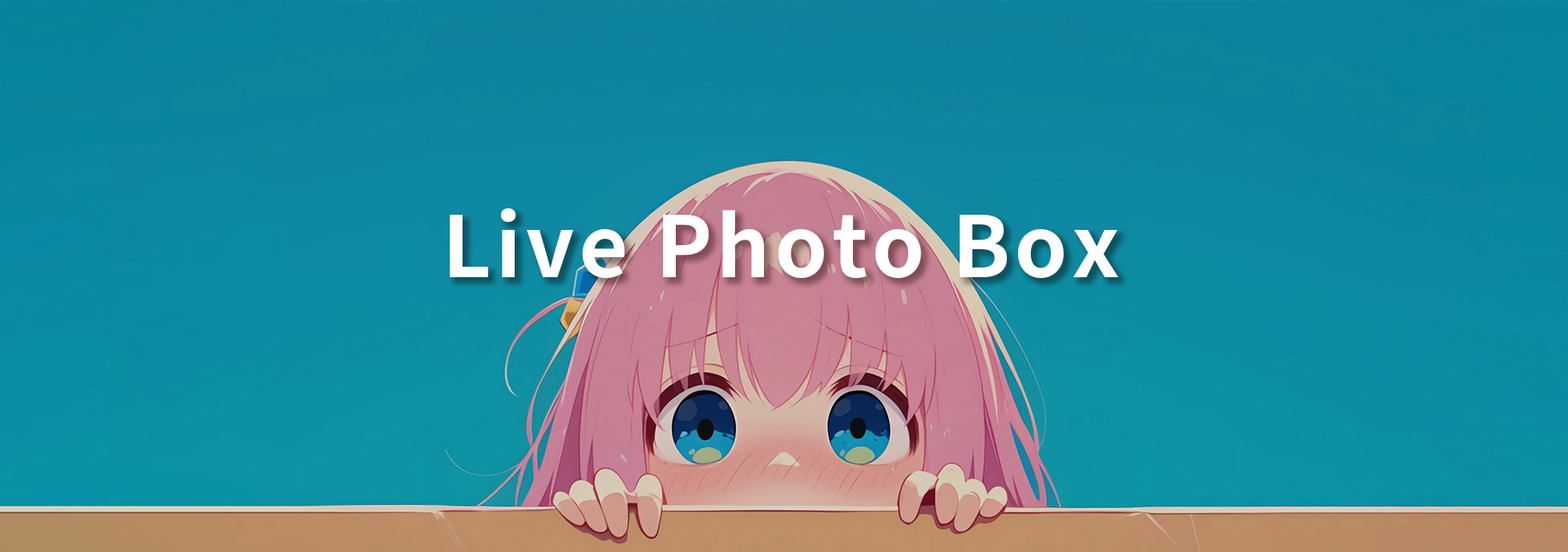
<style>
.page{position:relative;width:1568px;height:552px}
.page>*{position:absolute;margin:0}
.t1{font:84.6px "SourceHanSansCN-Bold";letter-spacing:0.05em;color:#ffffff}
</style>
<div class="page">
<p class="t1" style="left:450px;top:208px;width:668px;height:70px">Live Photo Box</p>
</div>
